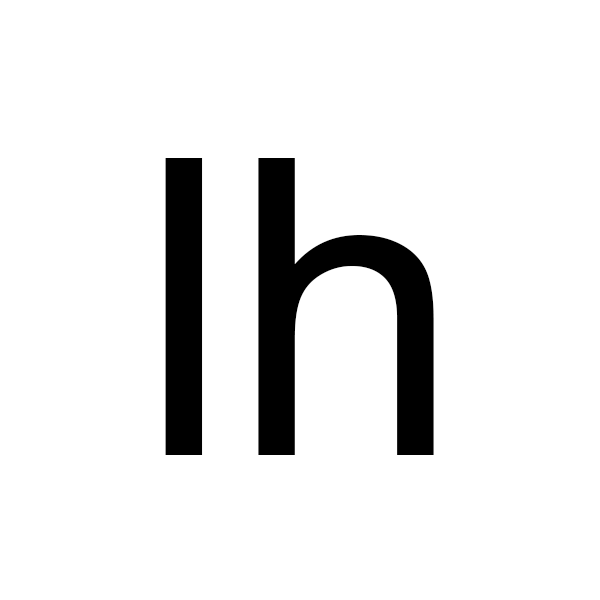
<style>
.page{position:relative;width:600px;height:600px;background:#ffffff}
.page>*{position:absolute;margin:0}
.t1{font:415px "ArialMT";color:#000000}
</style>
<div class="page">
<p class="t1" style="left:165px;top:158px;width:269px;height:297px">lh</p>
</div>
